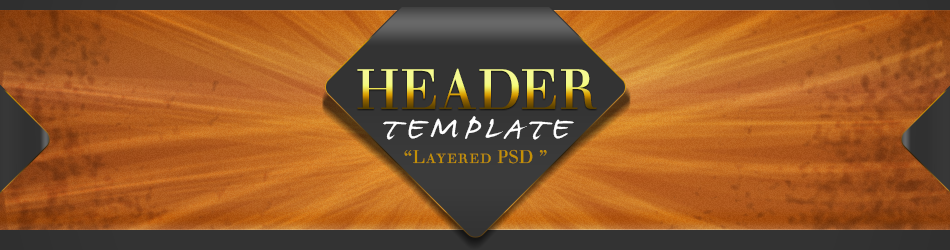
<style>
.page{position:relative;width:950px;height:250px}
.page>*{position:absolute;margin:0}
.t1{font:55.6px "Justus-Versalitas"}
.t2{font:41.2px "JamesFajardo";letter-spacing:0.1em;color:#ffffff}
.t3{font:18px "Justus-Versalitas";letter-spacing:0.02em;color:#c49005}
</style>
<div class="page">
<p class="t1" style="left:357px;top:68px;width:240px;height:41px">HEADER</p>
<p class="t2" style="left:383px;top:116px;width:191px;height:24px">TEMPLATE</p>
<p class="t3" style="left:404px;top:149px;width:143px;height:15px">“Layered PSD ”</p>
</div>
